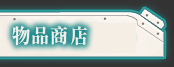
<style>
.page{position:relative;width:174px;height:67px}
.page>*{position:absolute;margin:0}
.t1{font:20px "RyuminPr6N-ExBold";letter-spacing:0.075em;color:#efefeb;scale:0.9 1}
</style>
<div class="page">
<p class="t1" style="left:12px;top:25px;width:76px;height:21px">物品商店</p>
</div>
